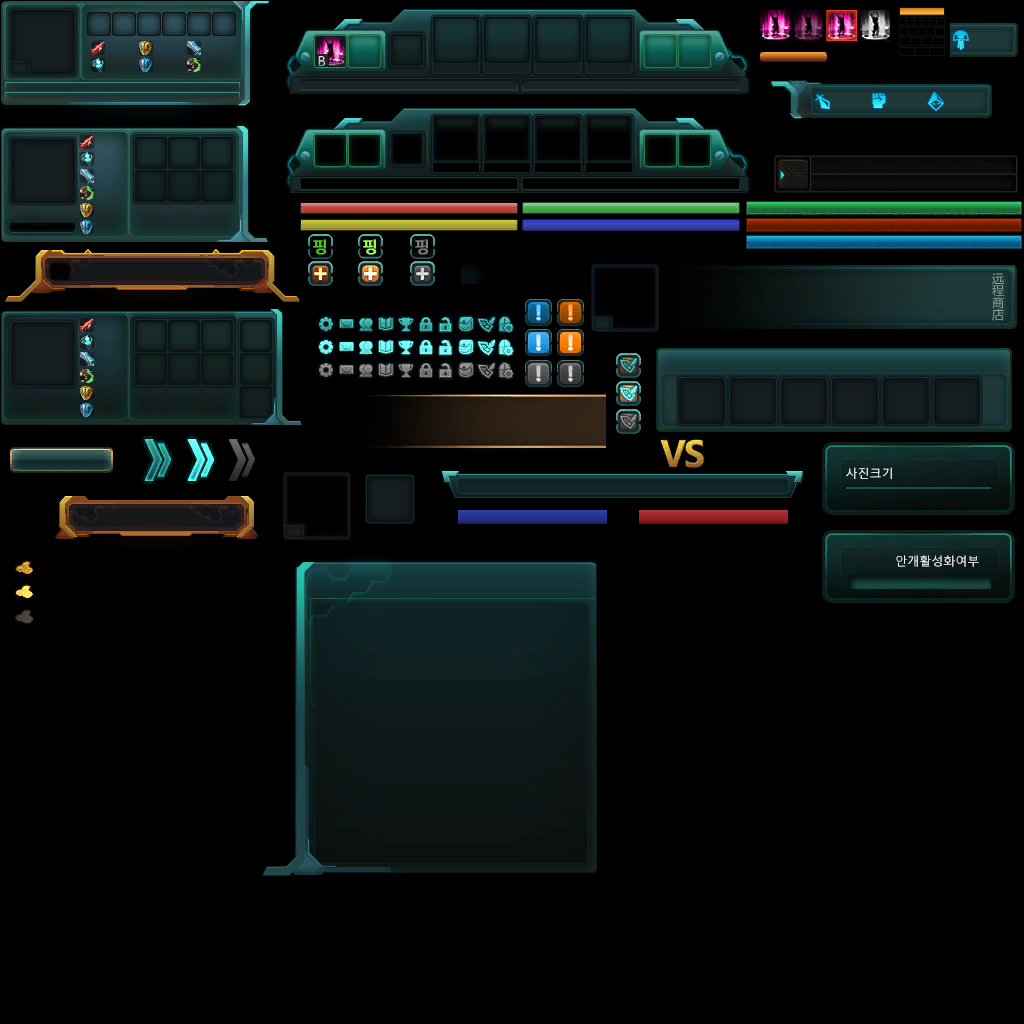
<style>
.page{position:relative;width:1024px;height:1024px;background:#000000}
.page>*{position:absolute;margin:0}
.t1{font:16px "NanumGothicBold";color:#52be29;font-weight:bold}
.t2{font:16px "NanumGothicBold";color:#9cf75a;font-weight:bold}
.t3{font:16px "NanumGothicBold";color:#7b797b;font-weight:bold}
.t4{font:12px "MalgunGothicRegular";color:#ffffff}
</style>
<div class="page">
<p class="t1" style="left:313px;top:239px;width:14px;height:16px">핑</p>
<p class="t2" style="left:363px;top:239px;width:14px;height:16px">핑</p>
<p class="t3" style="left:415px;top:239px;width:14px;height:16px">핑</p>
<p class="t4" style="left:846px;top:467px;width:46px;height:12px">사진크기</p>
<p class="t4" style="left:896px;top:555px;width:83px;height:12px">안개활성화여부</p>
</div>
